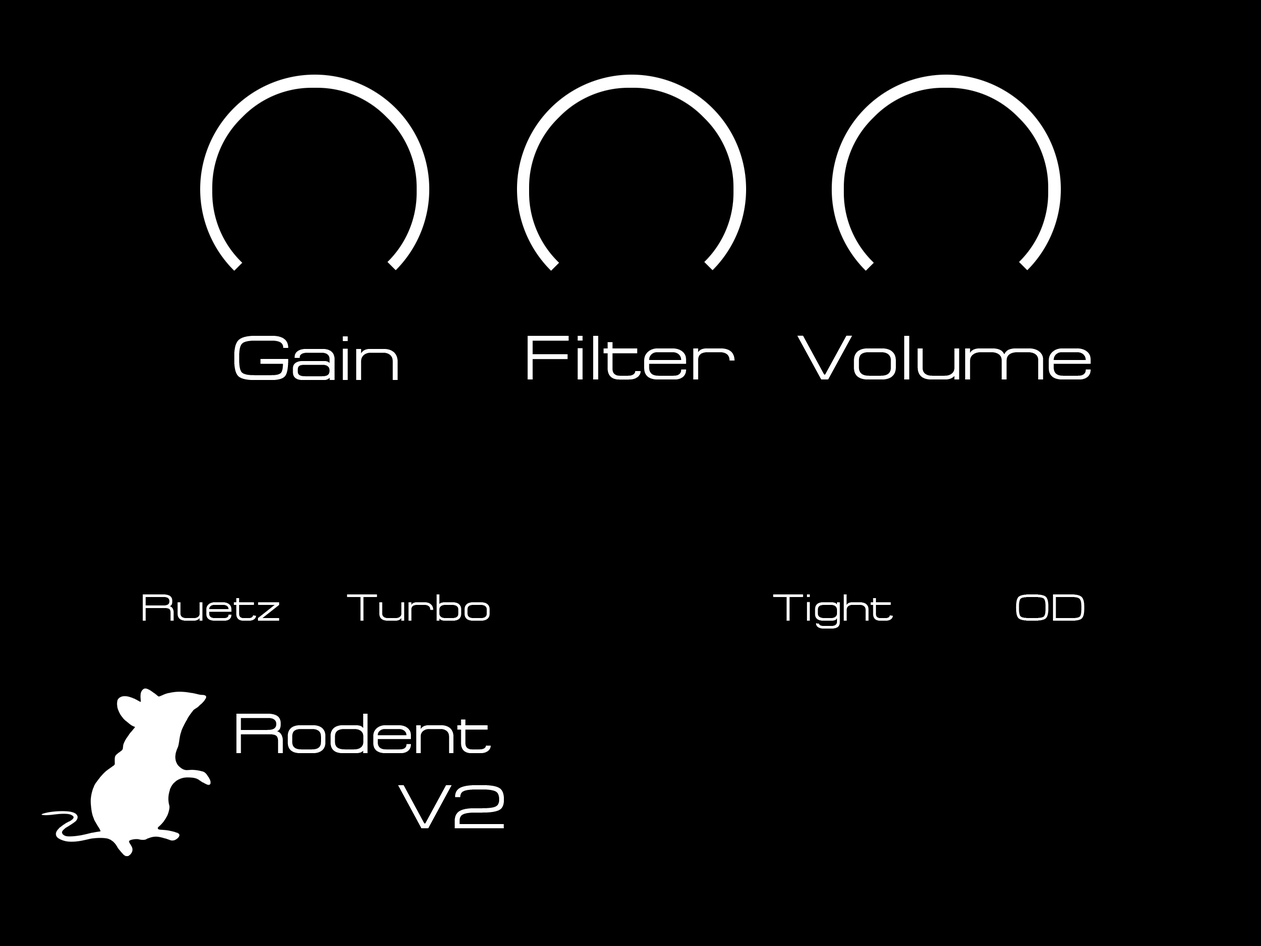
<style>
.page{position:relative;width:1261px;height:946px;background:#000000}
.page>*{position:absolute;margin:0}
.t1{font:63px "Federation";color:#ffffff}
.t2{font:37.8px "Federation";color:#ffffff}
.t3{font:56.6px "Federation";color:#ffffff}
.t4{font:61.8px "Federation";color:#ffffff}
</style>
<div class="page">
<p class="t1" style="left:234px;top:336px;width:164px;height:44px">Gain</p>
<p class="t1" style="left:527px;top:336px;width:207px;height:44px">Filter</p>
<p class="t1" style="left:797px;top:335px;width:294px;height:44px">Volume</p>
<p class="t2" style="left:142px;top:594px;width:138px;height:26px">Ruetz</p>
<p class="t2" style="left:347px;top:594px;width:143px;height:26px">Turbo</p>
<p class="t2" style="left:773px;top:594px;width:120px;height:34px">Tight</p>
<p class="t2" style="left:1016px;top:594px;width:68px;height:26px">OD</p>
<p class="t3" style="left:236px;top:713px;width:255px;height:40px">Rodent</p>
<p class="t4" style="left:398px;top:785px;width:106px;height:43px">V2</p>
</div>
